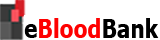
<style>
.page{position:relative;width:160px;height:40px;background:#ffffff}
.page>*{position:absolute;margin:0}
.t1{font:26px "Tahoma-Bold";color:#fe0000;scale:0.86 1}
.t2{font:26px "Tahoma-Bold";color:#000000;scale:0.86 1}
</style>
<div class="page">
<p class="t1" style="left:24px;top:18px;width:135px;height:20px"><span class="t2">e</span>Blood<span class="t2">Bank</span></p>
</div>
